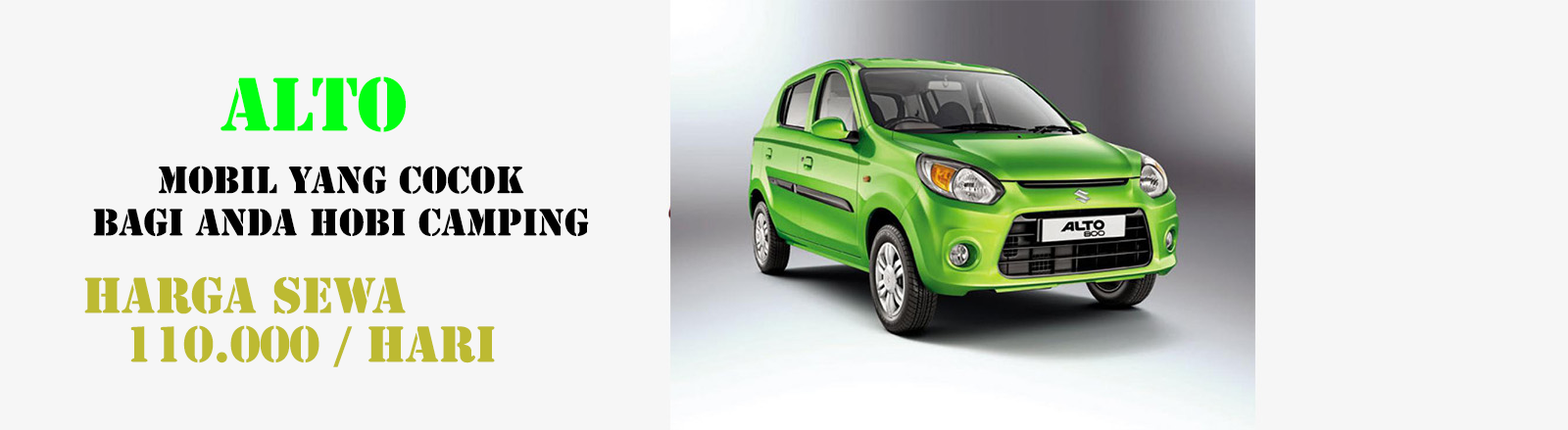
<style>
.page{position:relative;width:1568px;height:430px;background:#f6f6f6}
.page>*{position:absolute;margin:0}
.t1{font:70.6px "StencilStd";color:#00ff12}
.t2{font:35.3px "StencilStd";color:#010101}
.t3{font:47px "StencilStd";color:#bdba32}
</style>
<div class="page">
<p class="t1" style="left:220px;top:76px;width:186px;height:56px">ALTO</p>
<p class="t2" style="left:93px;top:166px;width:496px;height:70px;text-align:center">MOBIL yang cocok<br>bagi anda hobi camping</p>
<p class="t3" style="left:84px;top:276px;width:322px;height:39px">HARGA SEWA</p>
<p class="t3" style="left:130px;top:325px;width:365px;height:43px">110.000 / hari</p>
</div>
